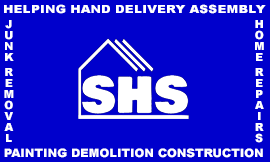
<style>
.page{position:relative;width:270px;height:162px;background:#0000cc}
.page>*{position:absolute;margin:0}
.t1{font:11px "Arial-Black";color:#ffffff;scale:1.15 1}
.t2{font:11px "Arial-Black";color:#ffffff}
.t3{font:11.5px "Arial-Black";color:#ffffff}
</style>
<div class="page">
<p class="t1" style="left:4px;top:4px;width:262px;height:10px">HELPING HAND DELIVERY ASSEMBLY</p>
<p class="t2" style="left:4px;top:20px;width:10px;height:122px">JUNK REMOVAL</p>
<p class="t2" style="left:255px;top:20px;width:9px;height:123px">HOME REPAIRS</p>
<p class="t3" style="left:4px;top:148px;width:259px;height:10px">PAINTING DEMOLITION CONSTRUCTION</p>
</div>
